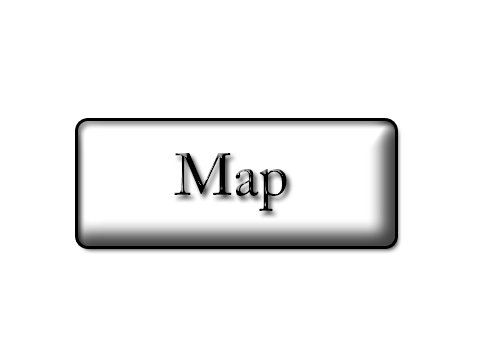
<style>
.page{position:relative;width:504px;height:360px;background:#ffffff}
.page>*{position:absolute;margin:0}
.t1{font:60px "ACaslonPro-Regular";color:#000000}
</style>
<div class="page">
<p class="t1" style="left:174px;top:153px;width:113px;height:58px">Map</p>
</div>
